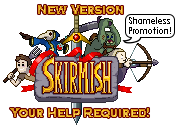
<style>
.page{position:relative;width:175px;height:125px;background:#ffffff}
.page>*{position:absolute;margin:0}
.t1{font:14.4px "CopperplateGothic-Bold";scale:0.83 1}
.t2{font:9.6px "CenturyGothic";color:#010101;scale:0.83 1}
</style>
<div class="page">
<p class="t1" style="left:38px;top:5px;width:85px;height:9px">New Version</p>
<p class="t2" style="left:129px;top:17px;width:42px;height:17px;text-align:center">Shameless<br>Promotion!</p>
<p class="t1" style="left:10px;top:108px;width:139px;height:10px">Your Help Required!</p>
</div>
